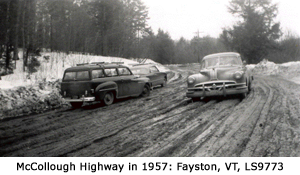
<style>
.page{position:relative;width:300px;height:175px}
.page>*{position:absolute;margin:0}
.t1{font:10px "Verdana";color:#000000;font-weight:bold}
</style>
<div class="page">
<p class="t1" style="left:17px;top:162px;width:266px;height:11px">McCollough Highway in 1957: Fayston, VT, LS9773</p>
</div>
